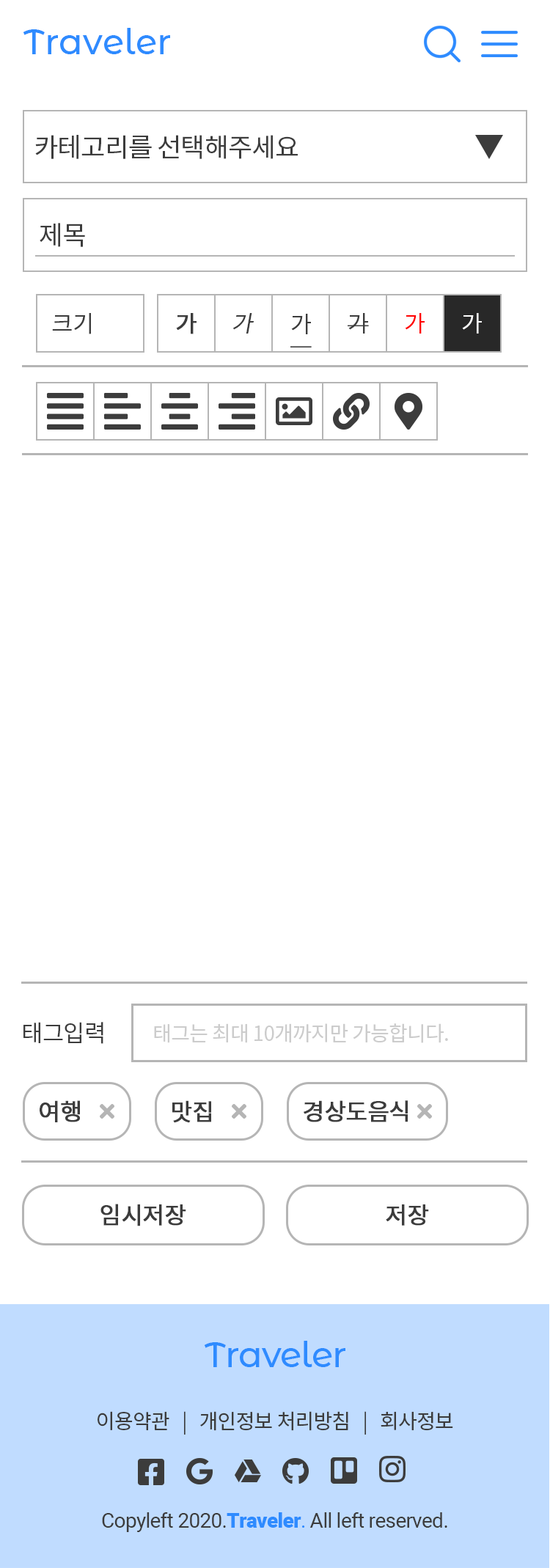
<style>
.page{position:relative;width:550px;height:1568px;background:#ffffff}
.page>*{position:absolute;margin:0}
.t1{font:35.2px "MontserratAlternates-Medium";color:#2e8bff}
.t2{font:26.4px "NotoSansKR-Regular";letter-spacing:-0.025em;color:#3c3c3c}
.t3{font:23.5px "NotoSansKR-Regular";letter-spacing:-0.025em;color:#3c3c3c}
.t4{font:23.5px "NotoSansKR-Regular";letter-spacing:-0.025em;color:#3c3c3c;font-weight:bold}
.t5{font:23.5px "NotoSansKR-Regular";letter-spacing:-0.025em;color:#3c3c3c;font-style:italic}
.t6{font:23.5px "NotoSansKR-Regular";letter-spacing:-0.025em;color:#3c3c3c;text-decoration:underline}
.t7{font:23.5px "NotoSansKR-Regular";letter-spacing:-0.025em;color:#ff0000}
.t8{font:23.5px "NotoSansKR-Regular";letter-spacing:-0.025em;color:#ffffff}
.t9{font:20.5px "NotoSansKR-Regular";letter-spacing:-0.025em;color:#cccccc}
.t10{font:35.2px "MontserratAlternates-Medium";letter-spacing:-0.025em;color:#2e8bff}
.t11{font:20.5px "NotoSansKR-Regular";letter-spacing:-0.025em;color:#3c3c3c}
.t12{font:20.5px "Roboto-Regular";letter-spacing:-0.025em;color:#3c3c3c}
.t13{font:20.5px "Roboto-Black";letter-spacing:-0.025em;color:#2e8bff}
.t14{font:20.5px "Roboto-Regular";letter-spacing:-0.025em;color:#2e8bff}
</style>
<div class="page">
<p class="t1" style="left:23px;top:28px;width:147px;height:26px">Traveler</p>
<p class="t2" style="left:35px;top:135px;width:263px;height:24px">카테고리를 선택해주세요</p>
<p class="t2" style="left:40px;top:223px;width:45px;height:24px">제목</p>
<p class="t3" style="left:52px;top:313px;width:39px;height:21px">크기</p>
<p class="t4" style="left:176px;top:313px;width:20px;height:21px">가</p>
<p class="t5" style="left:233px;top:313px;width:21px;height:21px">가</p>
<p class="t6" style="left:290px;top:314px;width:22px;height:33px">가</p>
<p class="t3" style="left:347px;top:313px;width:22px;height:21px">가</p>
<p class="t7" style="left:405px;top:313px;width:19px;height:21px">가</p>
<p class="t8" style="left:462px;top:313px;width:20px;height:21px">가</p>
<p class="t3" style="left:23px;top:1022px;width:80px;height:22px">태그입력</p>
<p class="t9" style="left:154px;top:1023px;width:294px;height:20px">태그는 최대 10개까지만 가능합니다.</p>
<p class="t4" style="left:40px;top:1100px;width:40px;height:22px">여행</p>
<p class="t4" style="left:172px;top:1100px;width:39px;height:23px">맛집</p>
<p class="t4" style="left:303px;top:1100px;width:105px;height:22px">경상도음식</p>
<p class="t4" style="left:100px;top:1204px;width:86px;height:22px">임시저장</p>
<p class="t4" style="left:386px;top:1204px;width:43px;height:22px">저장</p>
<p class="t10" style="left:204px;top:1341px;width:141px;height:26px">Traveler</p>
<p class="t11" style="left:97px;top:1411px;width:356px;height:24px">이용약관   |   개인정보 처리방침   |   회사정보</p>
<p class="t12" style="left:102px;top:1512px;width:345px;height:20px">Copyleft 2020.<span class="t13">Traveler</span><span class="t14">.</span> All left reserved.</p>
</div>
